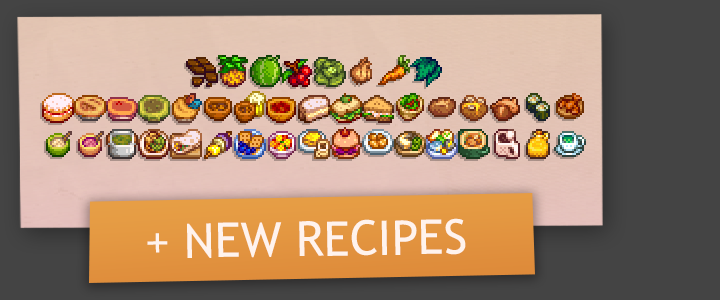
<style>
.page{position:relative;width:720px;height:300px}
.page>*{position:absolute;margin:0}
.t1{font:48px "TrebuchetMS";color:#fff3ed}
</style>
<div class="page">
<p class="t1" style="left:147px;top:218px;width:319px;height:40px;rotate:-1deg">+ NEW RECIPES</p>
</div>
